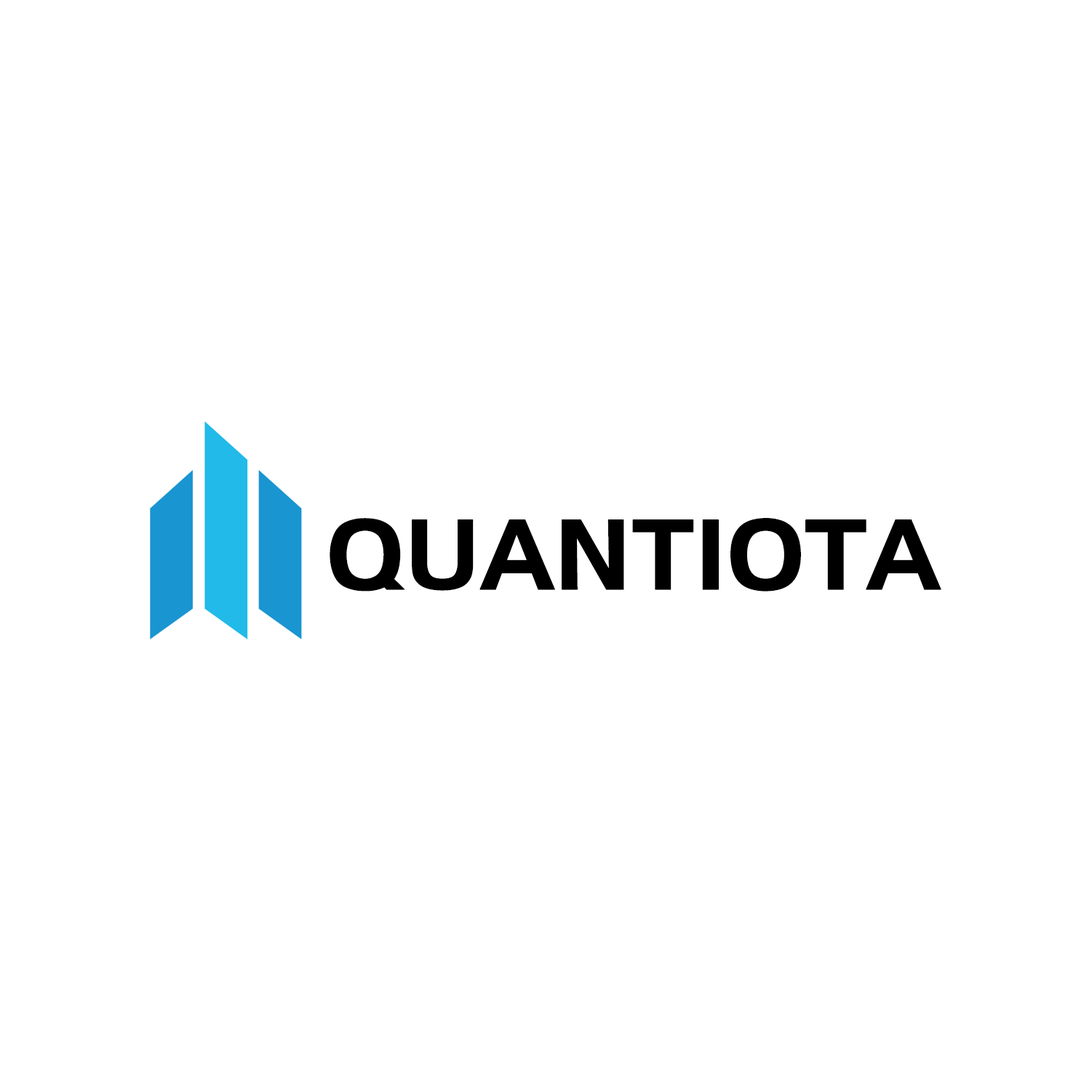
<style>
.page{position:relative;width:1092px;height:1092px;background:#ffffff}
.page>*{position:absolute;margin:0}
.t1{font:97px "HandelGothic";color:#000000;text-transform:uppercase;font-weight:bold}
</style>
<div class="page">
<p class="t1" style="left:330px;top:518px;width:611px;height:73px">QUANTIOTA</p>
</div>
